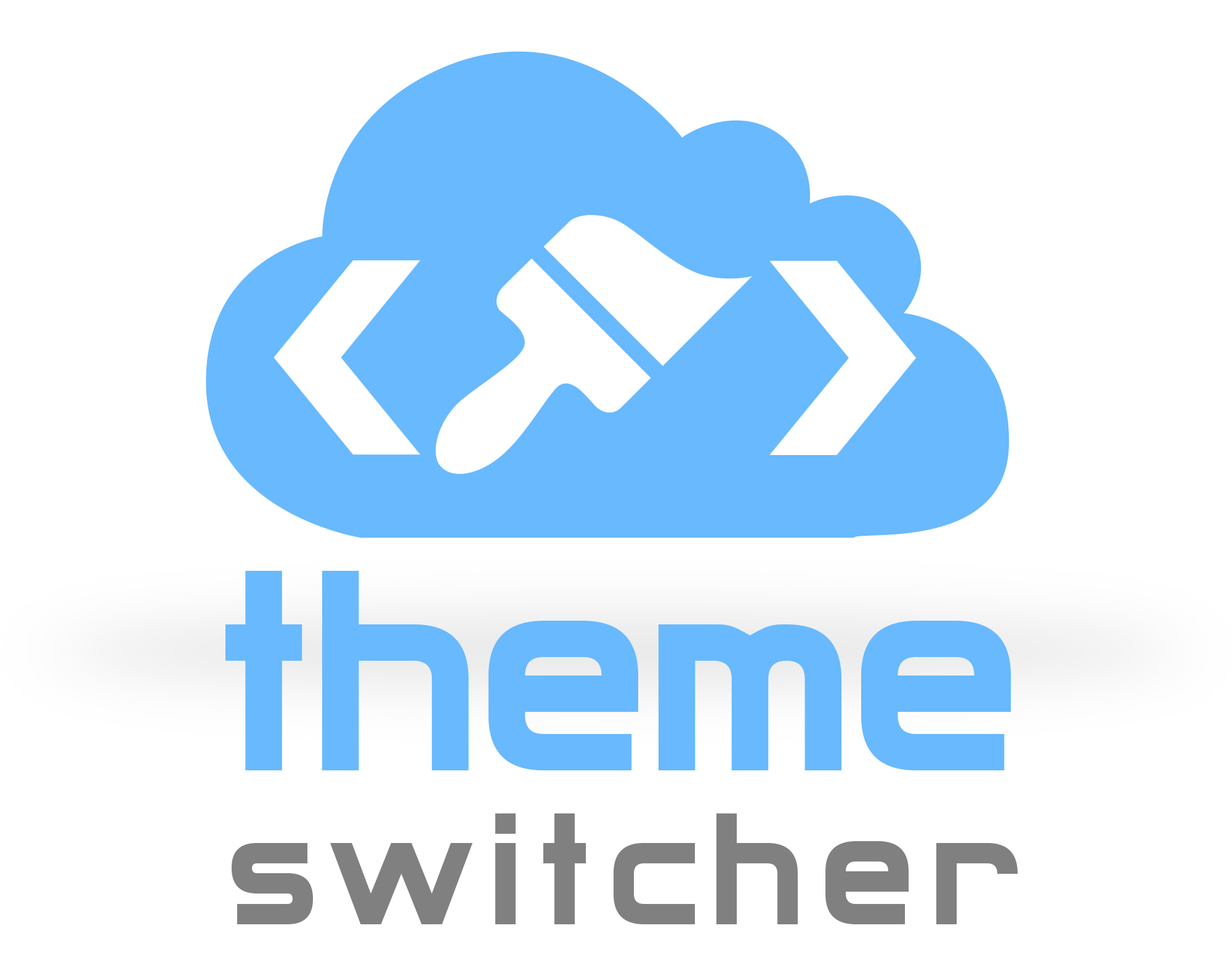
<style>
.page{position:relative;width:1232px;height:968px;background:#ffffff}
.page>*{position:absolute;margin:0}
.t1{font:184.7px/154px "Archangelsk";letter-spacing:0.09em;color:#808080}
.t2{font:332.5px/154px "Archangelsk";color:#68b9fd}
</style>
<div class="page">
<p class="t1" style="left:225px;top:571px;width:792px;height:353px;text-align:center"><span class="t2">theme<br></span>switcher</p>
</div>
